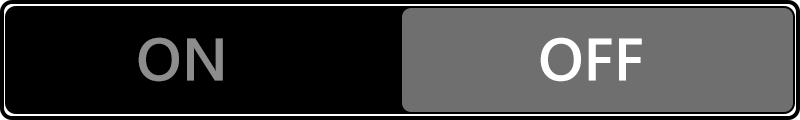
<style>
.page{position:relative;width:800px;height:120px;background:#000000}
.page>*{position:absolute;margin:0}
.t1{font:60px "SegoeUI-Semibold";color:#8d8d8d}
.t2{font:60px "SegoeUI-Semibold";color:#ffffff}
</style>
<div class="page">
<p class="t1" style="left:138px;top:37px;width:85px;height:45px">ON</p>
<p class="t2" style="left:540px;top:37px;width:102px;height:45px">OFF</p>
</div>
